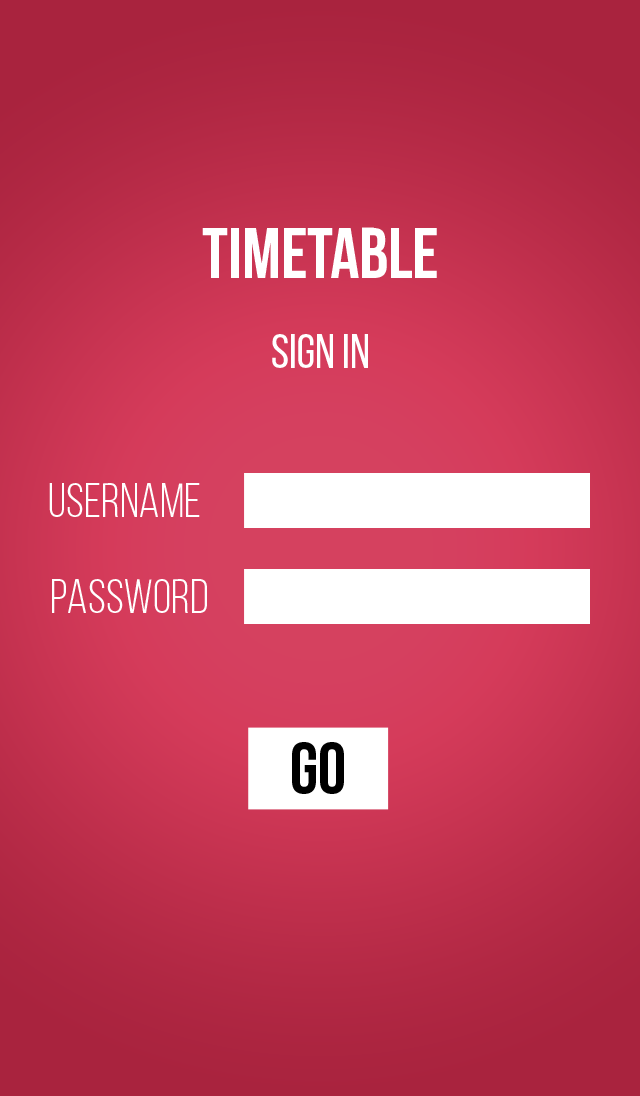
<style>
.page{position:relative;width:640px;height:1096px}
.page>*{position:absolute;margin:0}
.t1{font:72px "BebasNeueBold";color:#ffffff}
.t2{font:48px "BebasNeueRegular";color:#ffffff}
.t3{font:48px "BebasNeueBook";color:#ffffff}
.t4{font:72px "BebasNeueBold";color:#000000}
</style>
<div class="page">
<p class="t1" style="left:202px;top:227px;width:235px;height:51px">Timetable</p>
<p class="t2" style="left:272px;top:334px;width:96px;height:34px">SIGN IN</p>
<p class="t3" style="left:49px;top:483px;width:151px;height:34px">Username</p>
<p class="t3" style="left:52px;top:579px;width:155px;height:34px">PASSWORD</p>
<p class="t4" style="left:292px;top:742px;width:52px;height:52px">GO</p>
</div>
